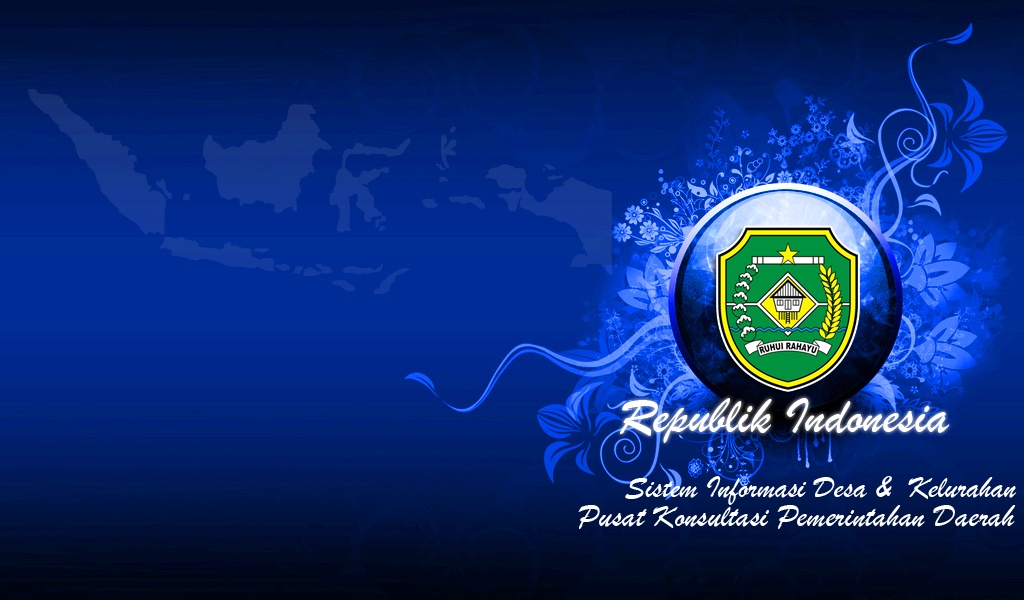
<style>
.page{position:relative;width:1024px;height:600px}
.page>*{position:absolute;margin:0}
.t1{font:52.9px "BrushScriptMT";color:#ffffff}
.t2{font:31.6px "BrushScriptMT";color:#ffffff}
.t3{font:33.3px "BrushScriptMT";color:#ffffff}
</style>
<div class="page">
<p class="t1" style="left:619px;top:398px;width:331px;height:45px">Republik Indonesia</p>
<p class="t2" style="left:625px;top:476px;width:392px;height:29px">Sistem Informasi Desa &amp;  Kelurahan</p>
<p class="t3" style="left:578px;top:505px;width:438px;height:24px">Pusat Konsultasi Pemerintahan Daerah</p>
</div>
